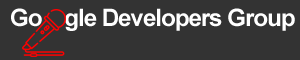
<style>
.page{position:relative;width:300px;height:60px;background:#333333}
.page>*{position:absolute;margin:0}
.t1{font:24px "Arial-BoldMT";letter-spacing:-0.04em;color:#ffffff}
</style>
<div class="page">
<p class="t1" style="left:11px;top:8px;width:284px;height:23px">Go    gle Developers Group</p>
</div>
